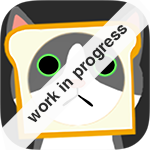
<style>
.page{position:relative;width:150px;height:150px}
.page>*{position:absolute;margin:0}
.t1{font:16.6px "Helvetica-Bold";color:#2b2b2b}
</style>
<div class="page">
<p class="t1" style="left:27px;top:25px;width:100px;height:98px;rotate:-45deg">work in progress</p>
</div>
